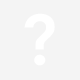
<style>
.page{position:relative;width:80px;height:80px;background:#f4f4f4}
.page>*{position:absolute;margin:0}
.t1{font:71.8px "Montserrat-Regular";color:#ffffff}
</style>
<div class="page">
<p class="t1" style="left:24px;top:13px;width:31px;height:53px">?</p>
</div>
